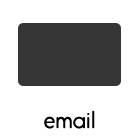
<style>
.page{position:relative;width:140px;height:140px;background:#ffffff}
.page>*{position:absolute;margin:0}
.t1{font:24px "Nova";color:#000000}
</style>
<div class="page">
<p class="t1" style="left:44px;top:110px;width:51px;height:19px">email</p>
</div>
